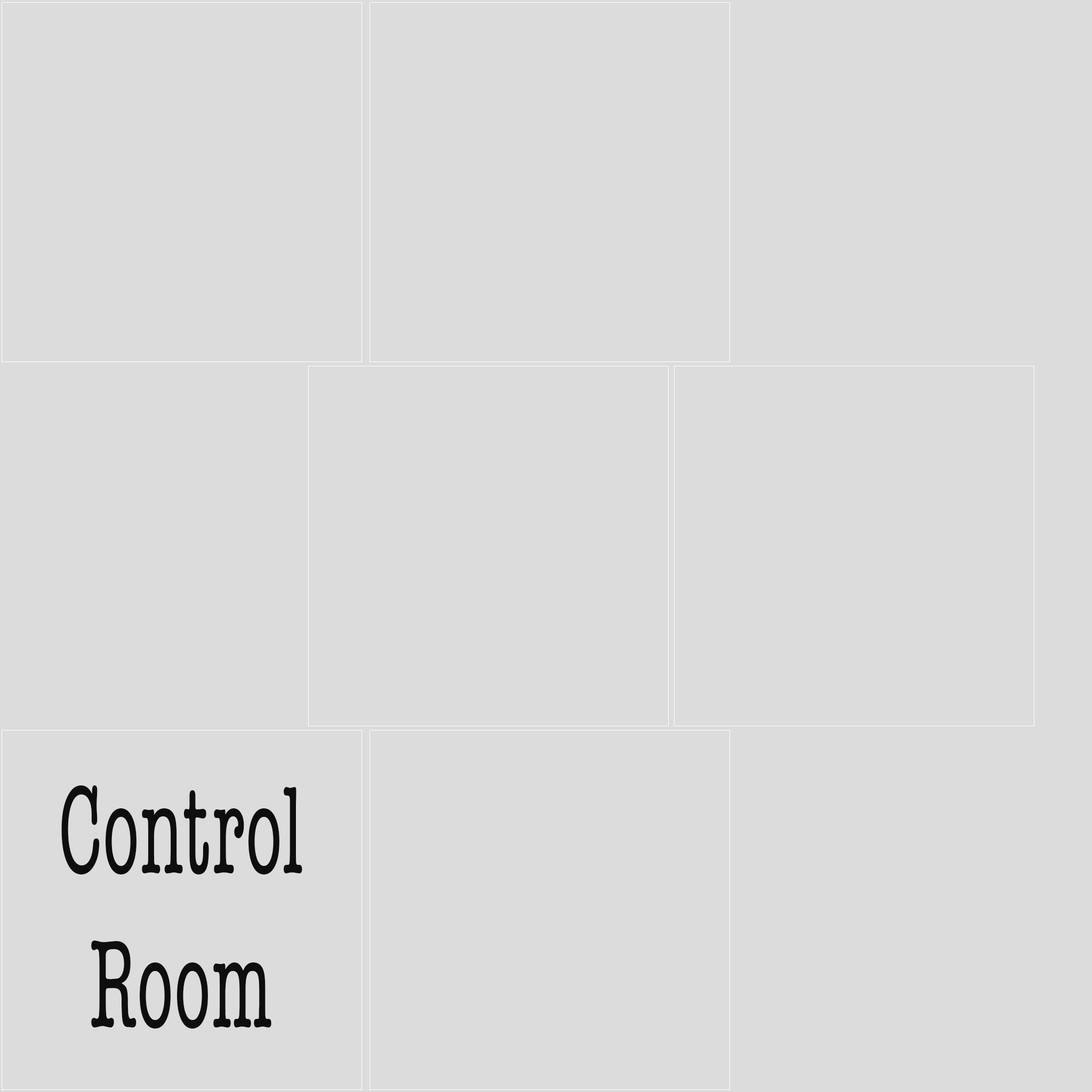
<style>
.page{position:relative;width:1092px;height:1092px;background:#dcdcdc}
.page>*{position:absolute;margin:0}
.t1{font:128.5px "AmericanTypewriter-Condensed";color:#0e0e0e;scale:0.68 1}
</style>
<div class="page">
<p class="t1" style="left:61px;top:785px;width:241px;height:244px;text-align:center">Control<br>Room</p>
</div>
